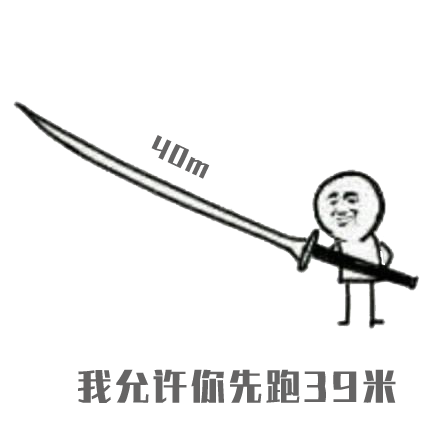
<style>
.page{position:relative;width:440px;height:440px;background:#ffffff}
.page>*{position:absolute;margin:0}
.t1{font:24px "AliHYAiHei";letter-spacing:0.05em;color:#656464}
.t2{font:36px "AliHYAiHei";letter-spacing:0.05em;color:#656464}
</style>
<div class="page">
<p class="t1" style="left:151px;top:135px;width:59px;height:44px;rotate:25deg">40m</p>
<p class="t2" style="left:78px;top:369px;width:318px;height:34px">我允许你先跑39米</p>
</div>
